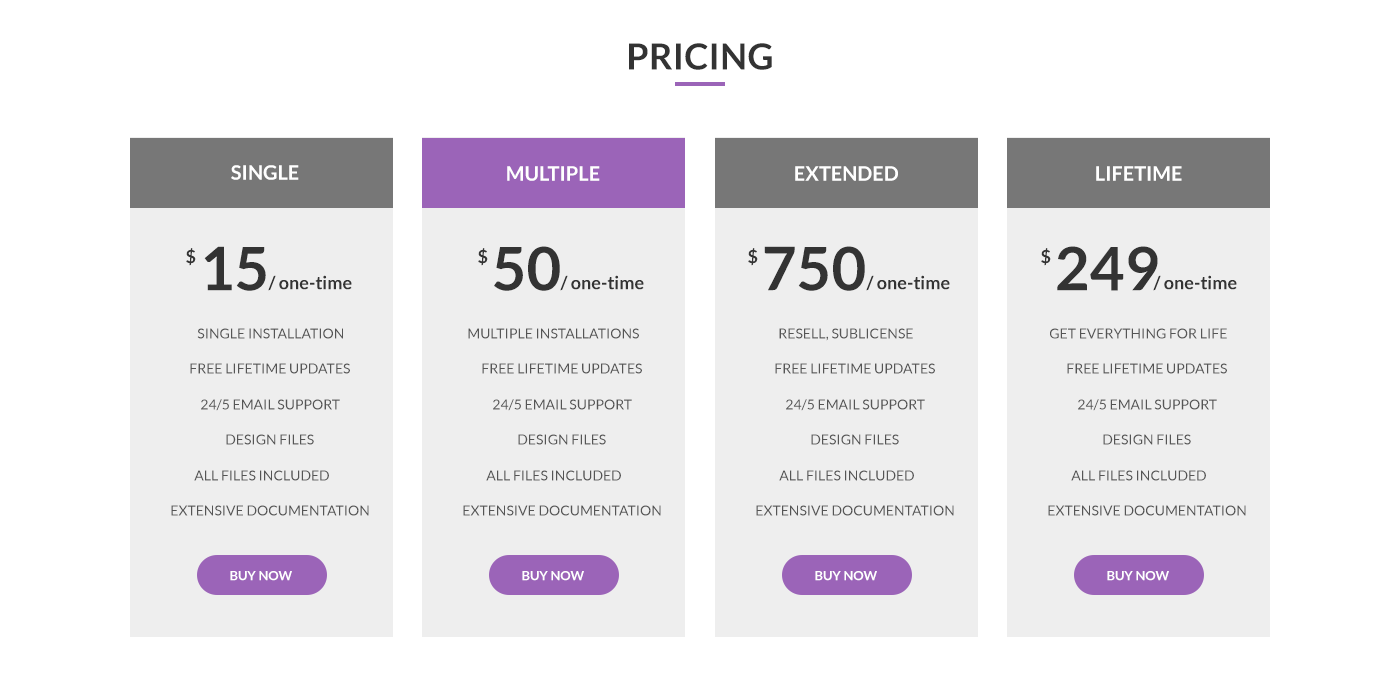
<style>
.page{position:relative;width:1400px;height:680px;background:#ffffff}
.page>*{position:absolute;margin:0}
.t1{font:36px "Lato-Bold";letter-spacing:0.005em;color:#333333}
.t2{font:20px "Lato-Bold";color:#ffffff}
.t3{font:60px "Lato-Bold";color:#333333}
.t4{font:18px "Lato-Bold";color:#333333}
.t5{font:14px "Lato-Regular";color:#555555}
.t6{font:13px "Lato-Bold";color:#ffffff}
</style>
<div class="page">
<p class="t1" style="left:629px;top:43px;width:143px;height:27px">PRICING</p>
<p class="t2" style="left:231px;top:165px;width:68px;height:15px">SINGLE</p>
<p class="t2" style="left:507px;top:166px;width:93px;height:15px">MULTIPLE</p>
<p class="t2" style="left:795px;top:166px;width:103px;height:15px">EXTENDED</p>
<p class="t2" style="left:1096px;top:166px;width:86px;height:15px">LIFETIME</p>
<p class="t3" style="left:204px;top:246px;width:62px;height:45px">15</p>
<p class="t3" style="left:494px;top:246px;width:66px;height:45px">50</p>
<p class="t3" style="left:764px;top:246px;width:101px;height:45px">750</p>
<p class="t3" style="left:1057px;top:246px;width:101px;height:45px">249</p>
<p class="t4" style="left:186px;top:248px;width:10px;height:18px">$</p>
<p class="t4" style="left:478px;top:248px;width:10px;height:18px">$</p>
<p class="t4" style="left:748px;top:248px;width:10px;height:18px">$</p>
<p class="t4" style="left:1041px;top:248px;width:10px;height:18px">$</p>
<p class="t4" style="left:268px;top:275px;width:84px;height:16px">/ one-time</p>
<p class="t4" style="left:560px;top:275px;width:84px;height:16px">/ one-time</p>
<p class="t4" style="left:866px;top:275px;width:84px;height:16px">/ one-time</p>
<p class="t4" style="left:1153px;top:275px;width:84px;height:16px">/ one-time</p>
<p class="t5" style="left:197px;top:328px;width:146px;height:11px">SINGLE INSTALLATION</p>
<p class="t5" style="left:468px;top:328px;width:171px;height:11px">MULTIPLE INSTALLATIONS</p>
<p class="t5" style="left:779px;top:328px;width:134px;height:13px">RESELL, SUBLICENSE</p>
<p class="t5" style="left:1050px;top:328px;width:177px;height:11px">GET EVERYTHING FOR LIFE</p>
<p class="t5" style="left:190px;top:363px;width:160px;height:11px">FREE LIFETIME UPDATES</p>
<p class="t5" style="left:482px;top:363px;width:160px;height:11px">FREE LIFETIME UPDATES</p>
<p class="t5" style="left:775px;top:363px;width:160px;height:11px">FREE LIFETIME UPDATES</p>
<p class="t5" style="left:1067px;top:363px;width:160px;height:11px">FREE LIFETIME UPDATES</p>
<p class="t5" style="left:201px;top:399px;width:139px;height:12px">24/5 EMAIL SUPPORT</p>
<p class="t5" style="left:493px;top:399px;width:139px;height:12px">24/5 EMAIL SUPPORT</p>
<p class="t5" style="left:786px;top:399px;width:139px;height:12px">24/5 EMAIL SUPPORT</p>
<p class="t5" style="left:1078px;top:399px;width:139px;height:12px">24/5 EMAIL SUPPORT</p>
<p class="t5" style="left:226px;top:434px;width:88px;height:11px">DESIGN FILES</p>
<p class="t5" style="left:518px;top:434px;width:88px;height:11px">DESIGN FILES</p>
<p class="t5" style="left:811px;top:434px;width:88px;height:11px">DESIGN FILES</p>
<p class="t5" style="left:1103px;top:434px;width:88px;height:11px">DESIGN FILES</p>
<p class="t5" style="left:194px;top:470px;width:135px;height:11px">ALL FILES INCLUDED</p>
<p class="t5" style="left:486px;top:470px;width:135px;height:11px">ALL FILES INCLUDED</p>
<p class="t5" style="left:779px;top:470px;width:135px;height:11px">ALL FILES INCLUDED</p>
<p class="t5" style="left:1071px;top:470px;width:135px;height:11px">ALL FILES INCLUDED</p>
<p class="t5" style="left:171px;top:505px;width:198px;height:11px">EXTENSIVE DOCUMENTATION</p>
<p class="t5" style="left:463px;top:505px;width:198px;height:11px">EXTENSIVE DOCUMENTATION</p>
<p class="t5" style="left:756px;top:505px;width:198px;height:11px">EXTENSIVE DOCUMENTATION</p>
<p class="t5" style="left:1048px;top:505px;width:198px;height:11px">EXTENSIVE DOCUMENTATION</p>
<p class="t6" style="left:230px;top:571px;width:62px;height:10px">BUY NOW</p>
<p class="t6" style="left:522px;top:571px;width:62px;height:10px">BUY NOW</p>
<p class="t6" style="left:815px;top:571px;width:62px;height:10px">BUY NOW</p>
<p class="t6" style="left:1107px;top:571px;width:62px;height:10px">BUY NOW</p>
</div>
